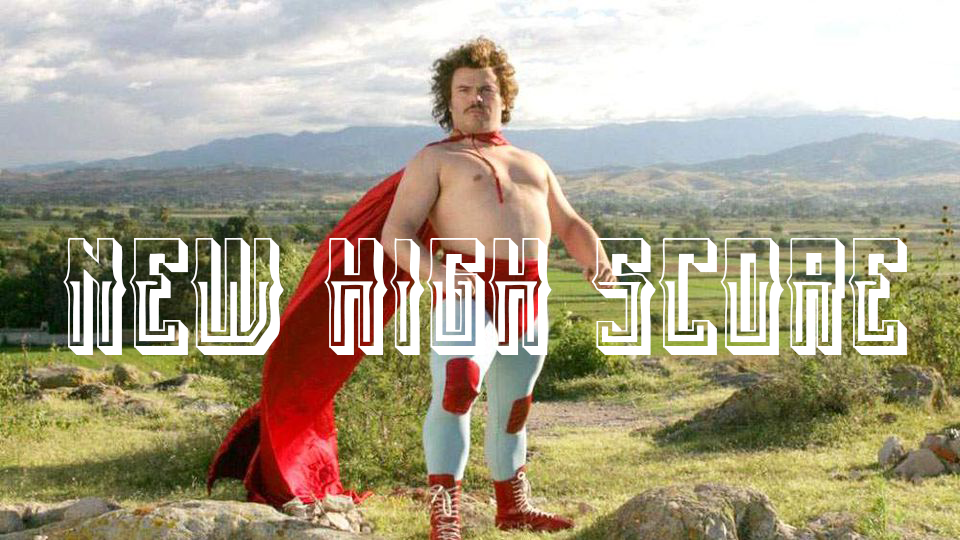
<style>
.page{position:relative;width:960px;height:540px}
.page>*{position:absolute;margin:0}
.t1{font:160px "Mexicanfiesta-Bold";color:#ffffff}
</style>
<div class="page">
<p class="t1" style="left:63px;top:238px;width:844px;height:117px">New High score</p>
</div>
